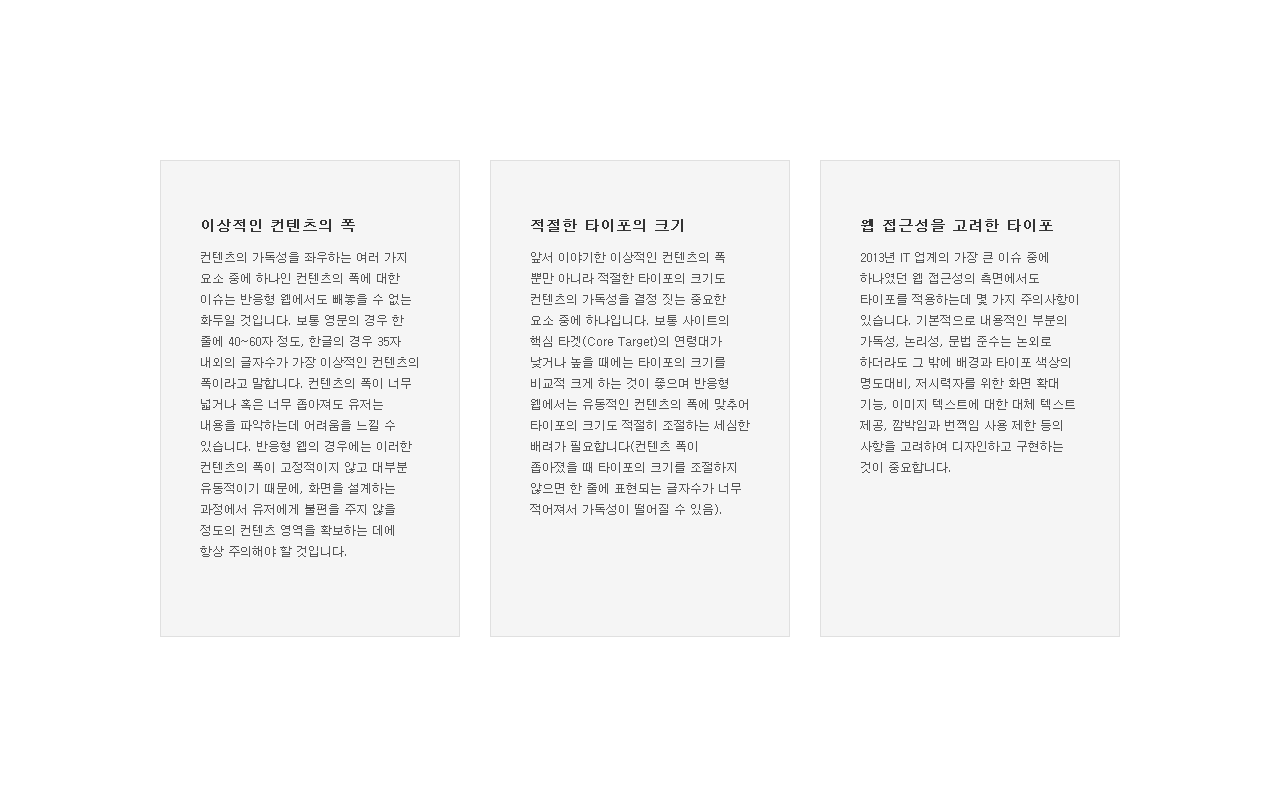
<style>
.page{position:relative;width:1280px;height:797px;background:#ffffff}
.page>*{position:absolute;margin:0}
.t1{font:12px/21px "Dotum";color:#555555}
.t2{font:15px/34px "Dotum";color:#333333;font-weight:bold}
</style>
<div class="page">
<p class="t1" style="left:200px;top:219px;width:218px;height:338px"><span class="t2">이상적인 컨텐츠의 폭<br></span>컨텐츠의 가독성을 좌우하는 여러 가지 요소 중에 하나인 컨텐츠의 폭에 대한 이슈는 반응형 웹에서도 빼놓을 수 없는 화두일 것입니다. 보통 영문의 경우 한 줄에 40~60자 정도, 한글의 경우 35자 내외의 글자수가 가장 이상적인 컨텐츠의 폭이라고 말합니다. 컨텐츠의 폭이 너무 넓거나 혹은 너무 좁아져도 유저는 내용을 파악하는데 어려움을 느낄 수 있습니다. 반응형 웹의 경우에는 이러한 컨텐츠의 폭이 고정적이지 않고 대부분 유동적이기 때문에, 화면을 설계하는 과정에서 유저에게 불편을 주지 않을 정도의 컨텐츠 영역을 확보하는 데에 항상 주의해야 할 것입니다.</p>
<p class="t1" style="left:530px;top:219px;width:220px;height:296px"><span class="t2">적절한 타이포의 크기<br></span>앞서 이야기한 이상적인 컨텐츠의 폭 뿐만 아니라 적절한 타이포의 크기도 컨텐츠의 가독성을 결정 짓는 중요한 요소 중에 하나입니다. 보통 사이트의 핵심 타겟(Core Target)의 연령대가 낮거나 높을 때에는 타이포의 크기를 비교적 크게 하는 것이 좋으며 반응형 웹에서는 유동적인 컨텐츠의 폭에 맞추어 타이포의 크기도 적절히 조절하는 세심한 배려가 필요합니다(컨텐츠 폭이 좁아졌을 때 타이포의 크기를 조절하지 않으면 한 줄에 표현되는 글자수가 너무 적어져서 가독성이 떨어질 수 있음).</p>
<p class="t1" style="left:860px;top:219px;width:218px;height:254px"><span class="t2">웹 접근성을 고려한 타이포<br></span>2013년 IT 업계의 가장 큰 이슈 중에 하나였던 웹 접근성의 측면에서도 타이포를 적용하는데 몇 가지 주의사항이 있습니다. 기본적으로 내용적인 부분의 가독성, 논리성, 문법 준수는 논외로 하더라도 그 밖에 배경과 타이포 색상의 명도대비, 저시력자를 위한 화면 확대 기능, 이미지 텍스트에 대한 대체 텍스트 제공, 깜박임과 번쩍임 사용 제한 등의 사항을 고려하여 디자인하고 구현하는 것이 중요합니다.</p>
</div>
